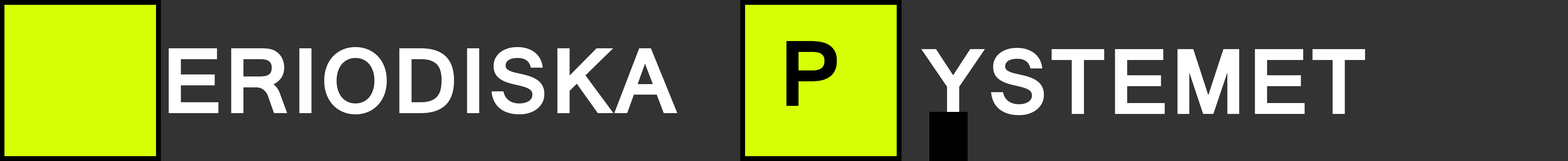
<style>
.page{position:relative;width:1568px;height:161px;background:#333333}
.page>*{position:absolute;margin:0}
.t1{font:100.8px "Latha-Bold";color:#000000}
.t2{font:100.8px "Latha-Bold";color:#ffffff}
</style>
<div class="page">
<p class="t1" style="left:786px;top:41px;width:51px;height:65px">P</p>
<p class="t2" style="left:169px;top:47px;width:508px;height:68px">ERIODISKA</p>
<p class="t2" style="left:921px;top:48px;width:444px;height:67px">YSTEMET</p>
</div>
